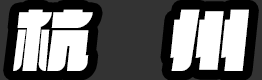
<style>
.page{position:relative;width:262px;height:80px;background:#ffffff}
.page>*{position:absolute;margin:0}
.t1{font:81.8px "zihunqijiyuzhouti_trial";letter-spacing:0.9em;color:#ffffff}
</style>
<div class="page">
<p class="t1" style="left:13px;top:9px;width:236px;height:62px">杭州</p>
</div>
